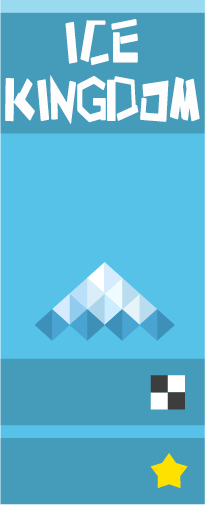
<style>
.page{position:relative;width:205px;height:505px;background:#459bba}
.page>*{position:absolute;margin:0}
.t1{font:79.7px "HappyZcool";letter-spacing:-0.02em;color:#fdfdfd;text-transform:uppercase;scale:0.67 1}
</style>
<div class="page">
<p class="t1" style="left:5px;top:19px;width:195px;height:105px;text-align:center">ICE<br>KINGDOM</p>
</div>
